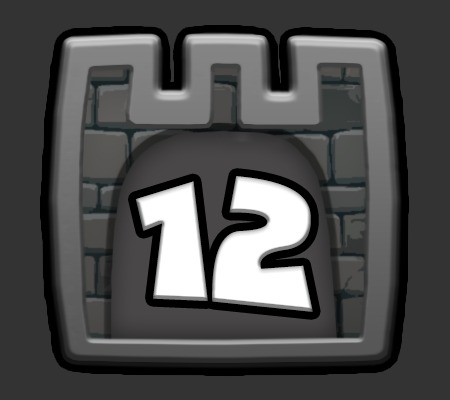
<style>
.page{position:relative;width:450px;height:400px;background:#333333}
.page>*{position:absolute;margin:0}
.t1{font:163.5px "Funhouse";color:#ffffff}
</style>
<div class="page">
<p class="t1" style="left:135px;top:176px;width:178px;height:136px">12</p>
</div>
